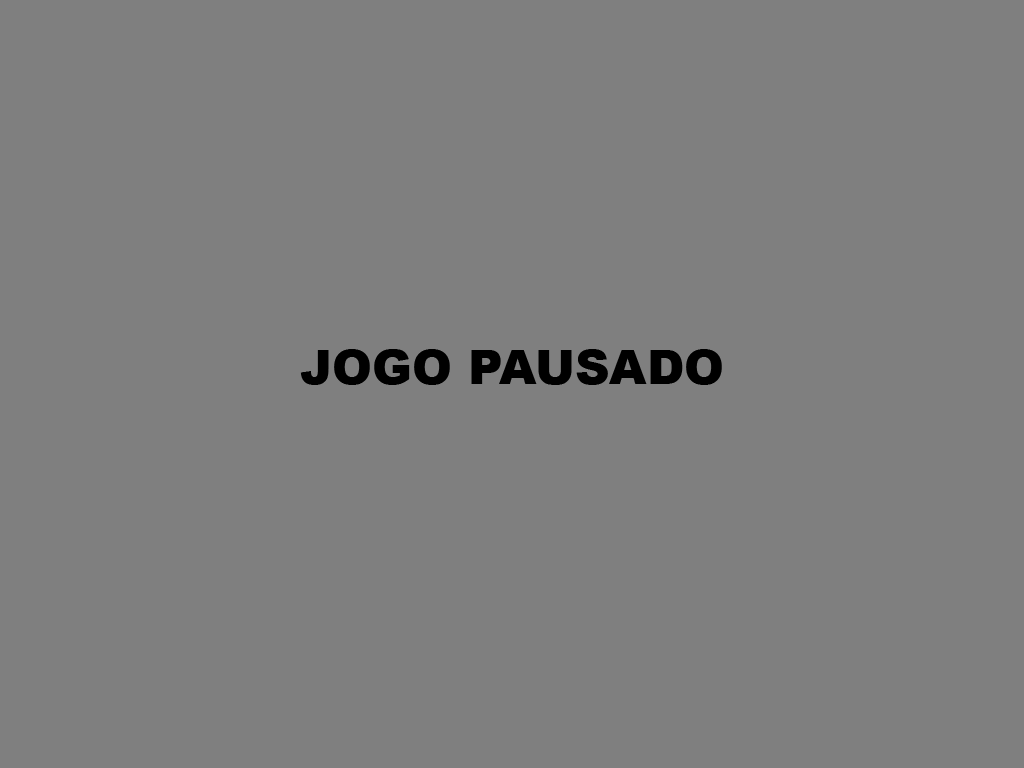
<style>
.page{position:relative;width:1024px;height:768px;background:#7f7f7f}
.page>*{position:absolute;margin:0}
.t1{font:48px "Arial-Black";color:#000000}
</style>
<div class="page">
<p class="t1" style="left:300px;top:349px;width:422px;height:36px">JOGO PAUSADO</p>
</div>
